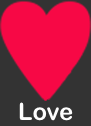
<style>
.page{position:relative;width:91px;height:126px;background:#f70845}
.page>*{position:absolute;margin:0}
.t1{font:24px "ArialRoundedMTBold";color:#fefefe}
</style>
<div class="page">
<p class="t1" style="left:19px;top:102px;width:54px;height:19px">Love</p>
</div>
